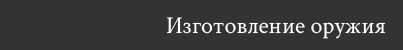
<style>
.page{position:relative;width:403px;height:50px;background:#333333}
.page>*{position:absolute;margin:0}
.t1{font:24px "CrimsonText-Regular";color:#ffffff}
</style>
<div class="page">
<p class="t1" style="left:167px;top:17px;width:219px;height:22px">Изготовление оружия</p>
</div>
